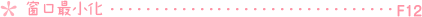
<style>
.page{position:relative;width:422px;height:17px;background:#ffffff}
.page>*{position:absolute;margin:0}
.t1{font:18px "¢è?";color:#ff93a5}
</style>
<div class="page">
<p class="t1" style="left:26px;top:0px;width:77px;height:16px">窗口最小化</p>
</div>
